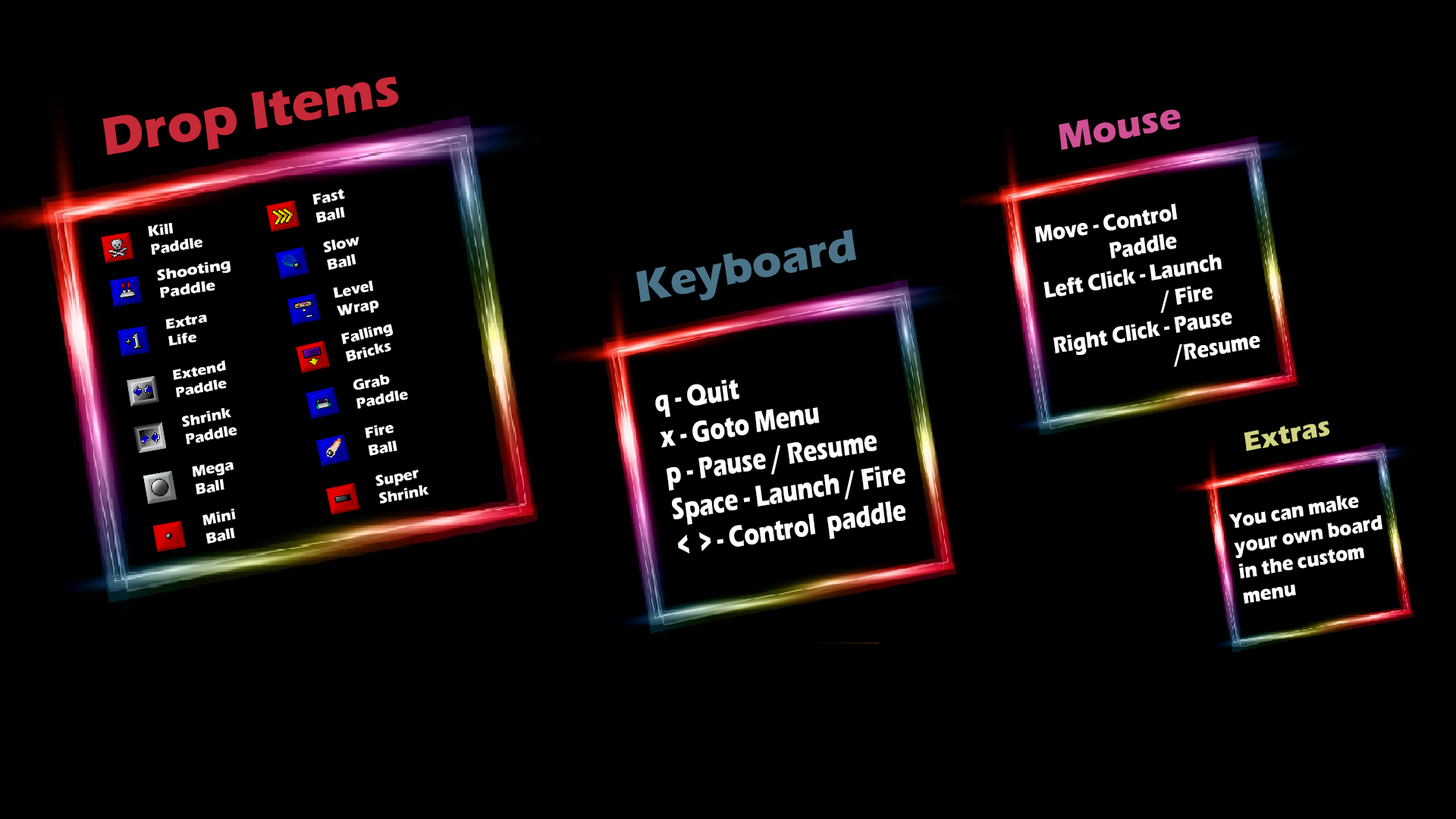
<style>
.page{position:relative;width:1456px;height:819px;background:#000000}
.page>*{position:absolute;margin:0}
.t1{font:54.6px "ErasITC-Bold";color:#c62a38}
.t2{font:37.9px "ErasITC-Bold";color:#cf5194}
.t3{font:15.2px "ErasITC-Bold";color:#fefefe}
.t4{font:23.3px "ErasITC-Bold";color:#fefefe;scale:0.85 1}
.t5{font:45.5px "ErasITC-Bold";color:#4c7489}
.t6{font:15.2px "ErasITC-Bold";color:#fefefe;scale:1.07 1}
.t7{font:14.2px "ErasITC-Bold";color:#fefefe;scale:1.07 1}
.t8{font:14.3px "ErasITC-Bold";color:#fefefe;scale:1.05 1}
.t9{font:30.4px "ErasITC-Bold";color:#fefefe;scale:0.75 1}
.t10{font:27.3px "ErasITC-Bold";color:#d1d380}
.t11{font:21.2px "ErasITC-Bold";color:#fefefe;scale:0.88 1}
</style>
<div class="page">
<p class="t1" style="left:102px;top:77px;width:297px;height:78px;rotate:-10deg">Drop Items</p>
<p class="t2" style="left:1059px;top:109px;width:122px;height:41px;rotate:-11deg">Mouse</p>
<p class="t3" style="left:312px;top:189px;width:33px;height:34px;rotate:-11deg">Fast<br>Ball</p>
<p class="t4" style="left:1034px;top:203px;width:226px;height:164px;rotate:-10deg">Move - Control<br>   Paddle<br>Left Click - Launch<br>        / Fire<br>Right Click - Pause <br>     /Resume</p>
<p class="t3" style="left:148px;top:222px;width:54px;height:33px;rotate:-10deg">Kill <br>Paddle</p>
<p class="t5" style="left:636px;top:229px;width:220px;height:74px;rotate:-11deg">Keyboard</p>
<p class="t3" style="left:323px;top:237px;width:36px;height:33px;rotate:-12deg">Slow<br>Ball</p>
<p class="t6" style="left:157px;top:261px;width:74px;height:37px;rotate:-9deg">Shooting<br>Paddle</p>
<p class="t3" style="left:333px;top:281px;width:46px;height:35px;rotate:-11deg">Level<br>Wrap</p>
<p class="t7" style="left:165px;top:315px;width:42px;height:31px;rotate:-10deg">Extra <br>Life</p>
<p class="t3" style="left:341px;top:324px;width:52px;height:38px;rotate:-15deg">Falling<br>Bricks</p>
<p class="t8" style="left:172px;top:360px;width:55px;height:37px;rotate:-11deg">Extend<br>Paddle</p>
<p class="t3" style="left:353px;top:375px;width:55px;height:34px;rotate:-11deg">Grab<br>Paddle</p>
<p class="t9" style="left:655px;top:379px;width:250px;height:175px;rotate:-9deg">q - Quit<br>x - Goto Menu<br>p - Pause / Resume<br>Space - Launch / Fire<br>&lt;  &gt; - Control  paddle</p>
<p class="t3" style="left:182px;top:408px;width:55px;height:36px;rotate:-11deg">Shrink<br>Paddle</p>
<p class="t3" style="left:365px;top:425px;width:32px;height:31px;rotate:-12deg">Fire<br>Ball</p>
<p class="t10" style="left:1244px;top:421px;width:86px;height:30px;rotate:-11deg">Extras</p>
<p class="t3" style="left:192px;top:462px;width:42px;height:32px;rotate:-10deg">Mega<br>Ball</p>
<p class="t3" style="left:375px;top:469px;width:54px;height:35px;rotate:-11deg">Super<br>Shrink</p>
<p class="t11" style="left:1228px;top:495px;width:154px;height:109px;rotate:-10deg">You can make <br>your own board<br>in the custom <br>menu</p>
<p class="t3" style="left:202px;top:508px;width:34px;height:36px;rotate:-12deg">Mini<br>Ball</p>
</div>
